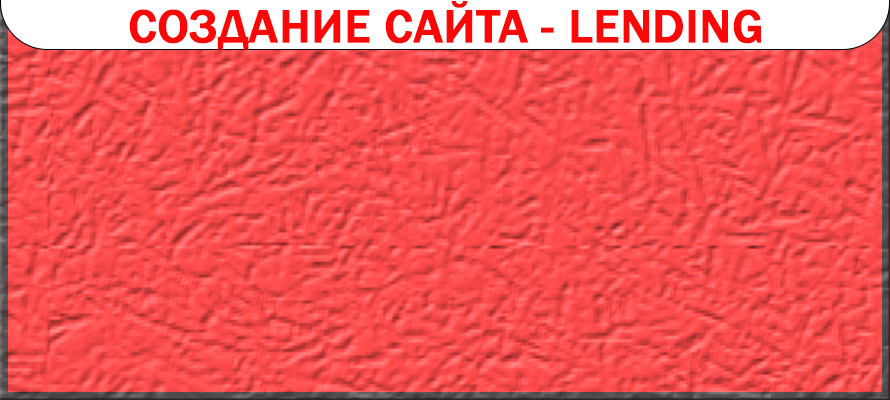
<style>
.page{position:relative;width:890px;height:400px}
.page>*{position:absolute;margin:0}
.t1{font:48px "FranklinGothic-Medium";color:#fc0707;text-transform:uppercase;font-weight:bold}
</style>
<div class="page">
<p class="t1" style="left:129px;top:1px;width:632px;height:49px">Создание сайта - Lending</p>
</div>
